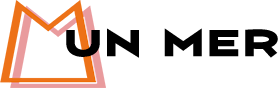
<style>
.page{position:relative;width:278px;height:88px;background:#ffffff}
.page>*{position:absolute;margin:0}
.t1{font:35px "Vortice-Concept";letter-spacing:0.02em;color:#000000}
</style>
<div class="page">
<p class="t1" style="left:66px;top:28px;width:212px;height:30px">UN MER</p>
</div>
